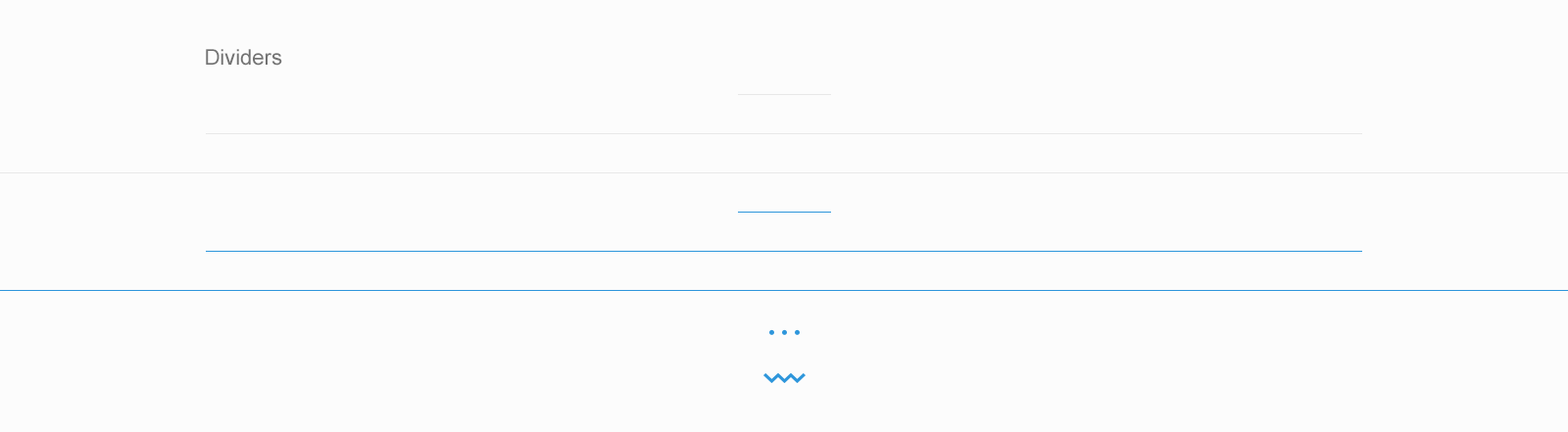
<style>
.page{position:relative;width:1568px;height:432px;background:#fcfcfc}
.page>*{position:absolute;margin:0}
.t1{font:21.6px "ArialMT";color:#737373}
</style>
<div class="page">
<p class="t1" style="left:206px;top:49px;width:76px;height:17px">Dividers</p>
</div>
